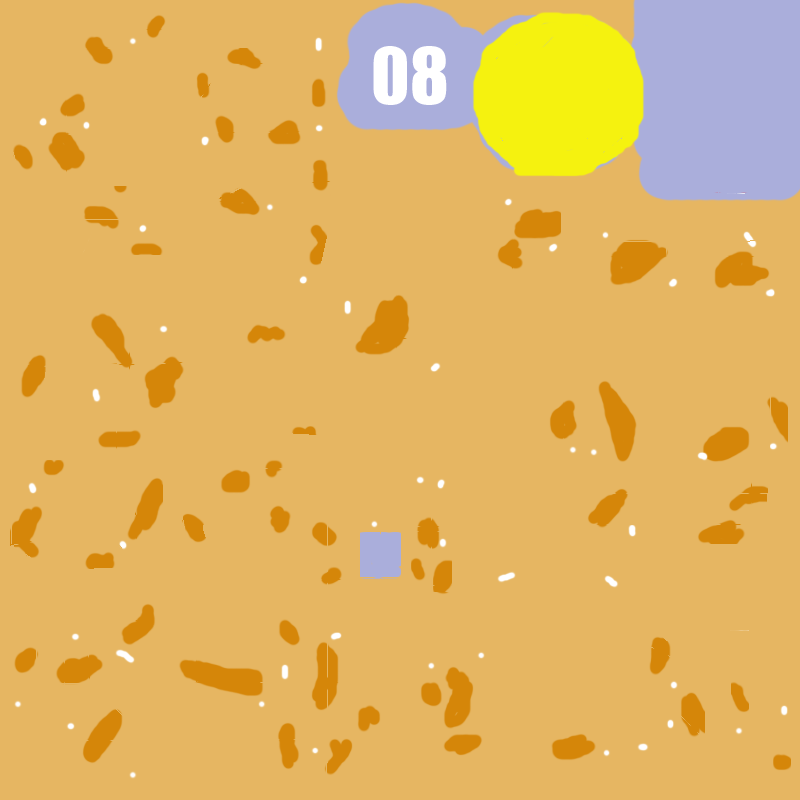
<style>
.page{position:relative;width:800px;height:800px;background:#e6b662}
.page>*{position:absolute;margin:0}
.t1{font:72px "Impact";color:#ffffff}
</style>
<div class="page">
<p class="t1" style="left:373px;top:46px;width:74px;height:59px">08</p>
</div>
